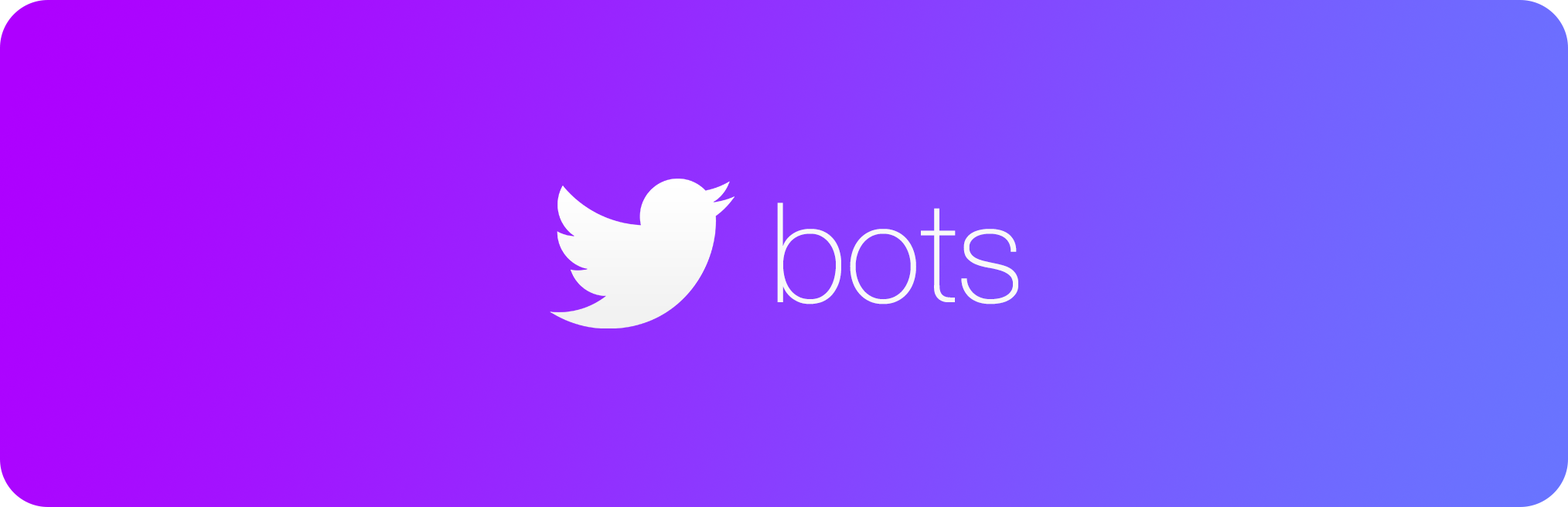
<style>
.page{position:relative;width:1568px;height:507px}
.page>*{position:absolute;margin:0}
.t1{font:139.2px "HelveticaNeue-Thin";color:#f9f9f9}
</style>
<div class="page">
<p class="t1" style="left:777px;top:203px;width:241px;height:102px">bots</p>
</div>
